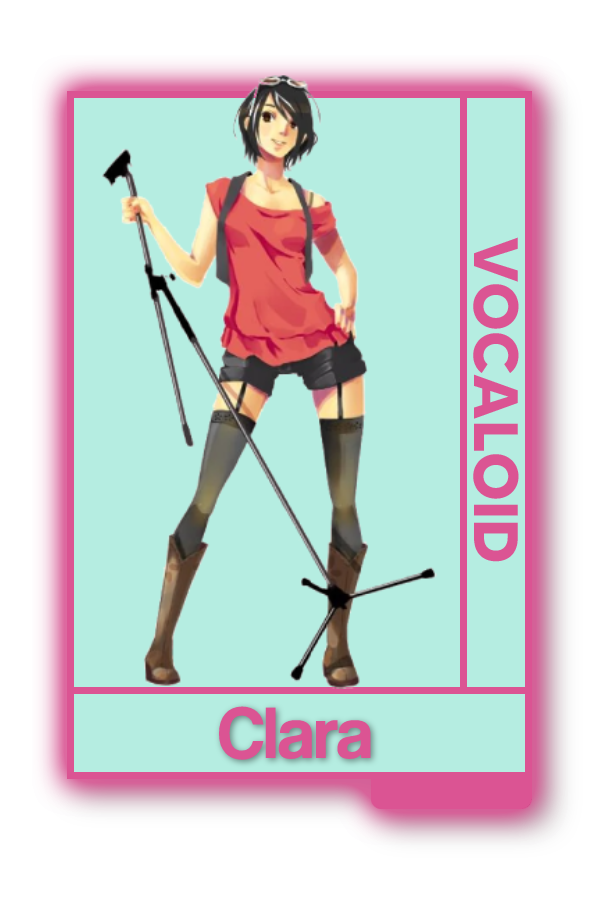
<style>
.page{position:relative;width:600px;height:900px;background:#b5ede1}
.page>*{position:absolute;margin:0}
.t1{font:62.5px "MADETOMMY-Bold";color:#db5493}
.t2{font:75px "CoolveticaRg-Regular";color:#db5493}
</style>
<div class="page">
<p class="t1" style="left:473px;top:237px;width:46px;height:325px;rotate:90deg">VOCALOID</p>
<p class="t2" style="left:218px;top:706px;width:153px;height:54px">Clara</p>
</div>
